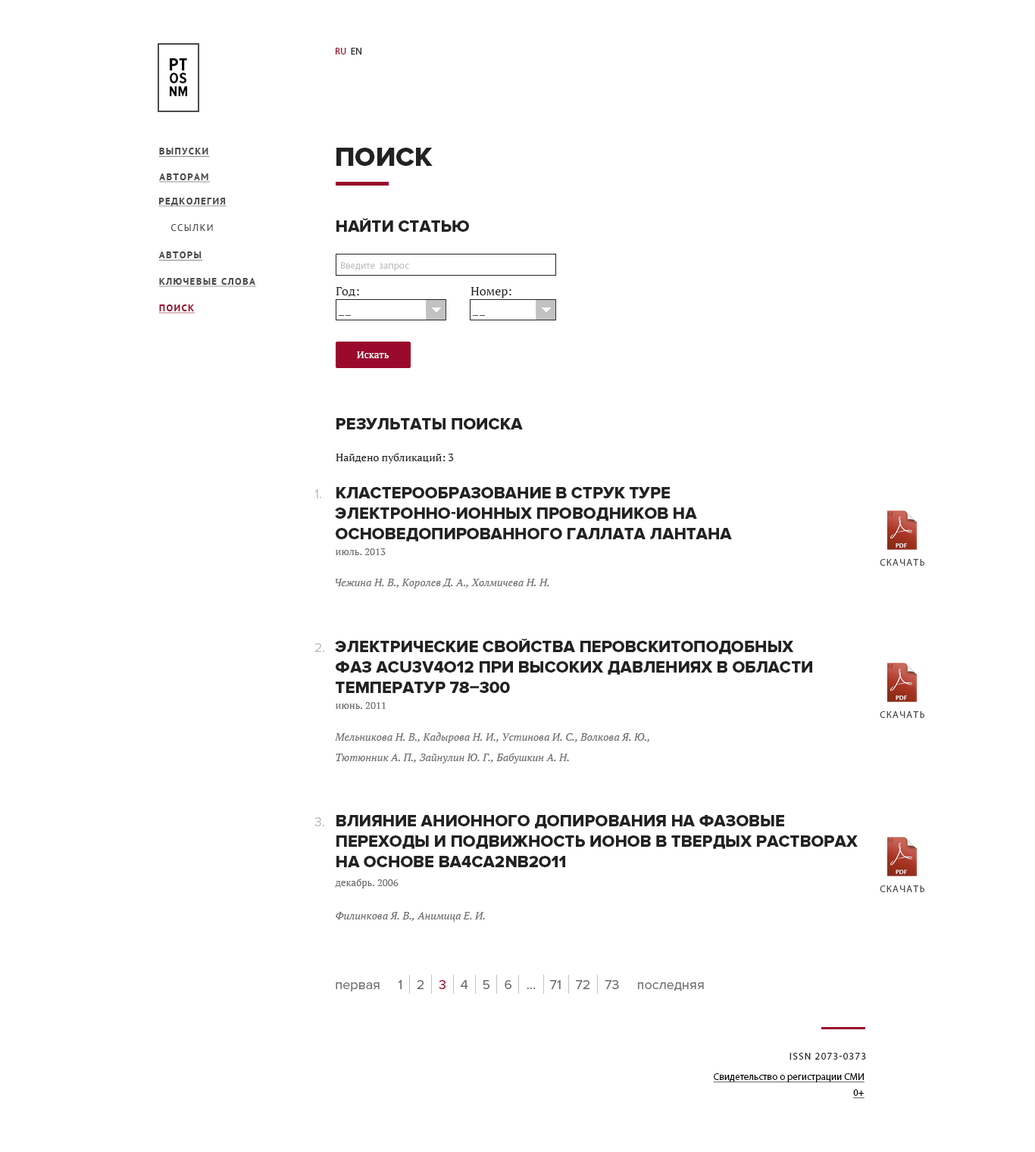
<style>
.page{position:relative;width:1035px;height:1152px;background:#ffffff}
.page>*{position:absolute;margin:0}
.t1{font:9.8px "MyriadPro-Regular";color:#9a092b}
.t2{font:9.8px "MyriadPro-Regular";color:#222222}
.t3{font:17.8px/12.8px "ProximaNovaCond-Bold";letter-spacing:0.02em;color:#000000;text-transform:uppercase}
.t4{font:15.8px/12.8px "ProximaNovaCond-Bold";letter-spacing:0.02em;color:#000000;text-transform:uppercase}
.t5{font:13.8px/12.8px "ProximaNovaCond-Bold";letter-spacing:0.02em;color:#000000;text-transform:uppercase}
.t6{font:9.8px "PTSans-Bold";letter-spacing:0.1em;color:#4d4a48;text-transform:uppercase;text-decoration:underline}
.t7{font:27.3px "ProximaNova-Extrabld";color:#222222;text-transform:uppercase}
.t8{font:16.7px "ProximaNova-Extrabld";color:#222222;text-transform:uppercase}
.t9{font:9.8px "PTSans-Regular";letter-spacing:0.1em;color:#4d4a48;text-transform:uppercase}
.t10{font:9.8px "MyriadPro-Regular";color:#c2c2c2}
.t11{font:12.1px "PTSerif-Regular";color:#222222}
.t12{font:9.8px "PTSans-Bold";letter-spacing:0.1em;color:#9a092b;text-transform:uppercase;text-decoration:underline}
.t13{font:9.8px "PTSerif-Regular";color:#ffffff}
.t14{font:10.6px "PTSerif-Regular";color:#222222}
.t15{font:13.6px "ProximaNova-Regular";color:#c2c2c2}
.t16{font:16.7px/20.5px "ProximaNova-Extrabld";color:#222222;text-transform:uppercase}
.t17{font:9.8px "PTSerif-Regular";color:#707070}
.t18{font:9.8px "MyriadPro-Regular";letter-spacing:0.1em;color:#4d4a48;text-transform:uppercase}
.t19{font:10.6px "PTSerif-Italic";color:#707070}
.t20{font:10.6px/20.5px "PTSerif-Italic";color:#707070}
.t21{font:13.6px "ProximaNova-Regular";color:#707070}
.t22{font:13.6px "ProximaNova-Regular";color:#9a092b}
.t23{font:9.8px "MyriadPro-Regular";letter-spacing:0.1em;color:#222222;text-transform:uppercase}
.t24{font:9.8px/15.9px "MyriadPro-Regular";color:#000000;text-decoration:underline}
</style>
<div class="page">
<p class="t1" style="left:336px;top:48px;width:25px;height:7px">RU  <span class="t2">EN</span></p>
<p class="t3" style="left:170px;top:58px;width:17px;height:38px">pt<br><span class="t4">os<br></span><span class="t5">nm</span></p>
<p class="t6" style="left:158px;top:148px;width:52px;height:9px">Выпуски</p>
<p class="t7" style="left:336px;top:148px;width:97px;height:18px">поиск</p>
<p class="t6" style="left:159px;top:173px;width:51px;height:10px">Авторам</p>
<p class="t6" style="left:158px;top:198px;width:69px;height:9px">Редколегия</p>
<p class="t8" style="left:336px;top:218px;width:133px;height:14px">найти статью</p>
<p class="t9" style="left:170px;top:224px;width:43px;height:7px">Ссылки</p>
<p class="t6" style="left:158px;top:252px;width:45px;height:9px">авторы</p>
<p class="t10" style="left:341px;top:262px;width:68px;height:9px">Введите  запрос</p>
<p class="t6" style="left:158px;top:278px;width:99px;height:9px">Ключевые слова</p>
<p class="t11" style="left:336px;top:287px;width:23px;height:10px">Год:</p>
<p class="t11" style="left:470px;top:287px;width:41px;height:11px">Номер:</p>
<p class="t12" style="left:158px;top:305px;width:37px;height:9px">Поиск</p>
<p class="t13" style="left:357px;top:352px;width:32px;height:6px">Искать</p>
<p class="t8" style="left:336px;top:418px;width:187px;height:12px">результаты поиска</p>
<p class="t14" style="left:336px;top:453px;width:118px;height:11px">Найдено публикаций: 3</p>
<p class="t15" style="left:314px;top:489px;width:7px;height:9px">1.</p>
<p class="t16" style="left:335px;top:487px;width:397px;height:55px">Кластерообразование в струк туре электронно-ионных проводников на основедопированного галлата лантана</p>
<p class="t17" style="left:335px;top:548px;width:51px;height:7px">июль. 2013</p>
<p class="t18" style="left:880px;top:559px;width:44px;height:7px">Скачать</p>
<p class="t19" style="left:335px;top:579px;width:214px;height:10px">Чежина Н. В., Королев Д. А., Холмичева Н. Н.</p>
<p class="t16" style="left:335px;top:639px;width:477px;height:54px">ЭЛЕКТРИЧЕСКИЕ СВОЙСТВА ПЕРОВСКИТОПОДОБНЫХ<br>ФАЗ ACu3V4O12 ПРИ ВЫСОКИХ ДАВЛЕНИЯХ В ОБЛАСТИ ТЕМПЕРАТУР 78–300</p>
<p class="t15" style="left:314px;top:643px;width:11px;height:9px">2.</p>
<p class="t17" style="left:335px;top:702px;width:51px;height:7px">июнь. 2011</p>
<p class="t18" style="left:880px;top:711px;width:44px;height:7px">Скачать</p>
<p class="t20" style="left:335px;top:733px;width:314px;height:31px">Мельникова Н. В., Кадырова Н. И., Устинова И. С., Волкова Я. Ю.,<br>Тютюнник А. П., Зайнулин Ю. Г., Бабушкин А. Н.</p>
<p class="t15" style="left:314px;top:817px;width:10px;height:10px">3.</p>
<p class="t16" style="left:336px;top:815px;width:522px;height:52px">Влияние анионного допирования на фазовые переходы и подвижность ионов в твердых растворах на основе Ba4Ca2Nb2O11</p>
<p class="t17" style="left:335px;top:879px;width:63px;height:10px">декабрь. 2006</p>
<p class="t18" style="left:880px;top:886px;width:44px;height:6px">Скачать</p>
<p class="t19" style="left:336px;top:912px;width:149px;height:10px">Филинкова Я. В., Анимица Е. И.</p>
<p class="t21" style="left:336px;top:980px;width:368px;height:12px">первая     1    2    <span class="t22">3</span>    4    5    6    ...    71    72    73     последняя</p>
<p class="t23" style="left:789px;top:1053px;width:77px;height:7px">ISSN 2073-0373</p>
<p class="t24" style="left:713px;top:1073px;width:151px;height:25px;text-align:right">Свидетельство о регистрации СМИ<br>0+</p>
</div>
